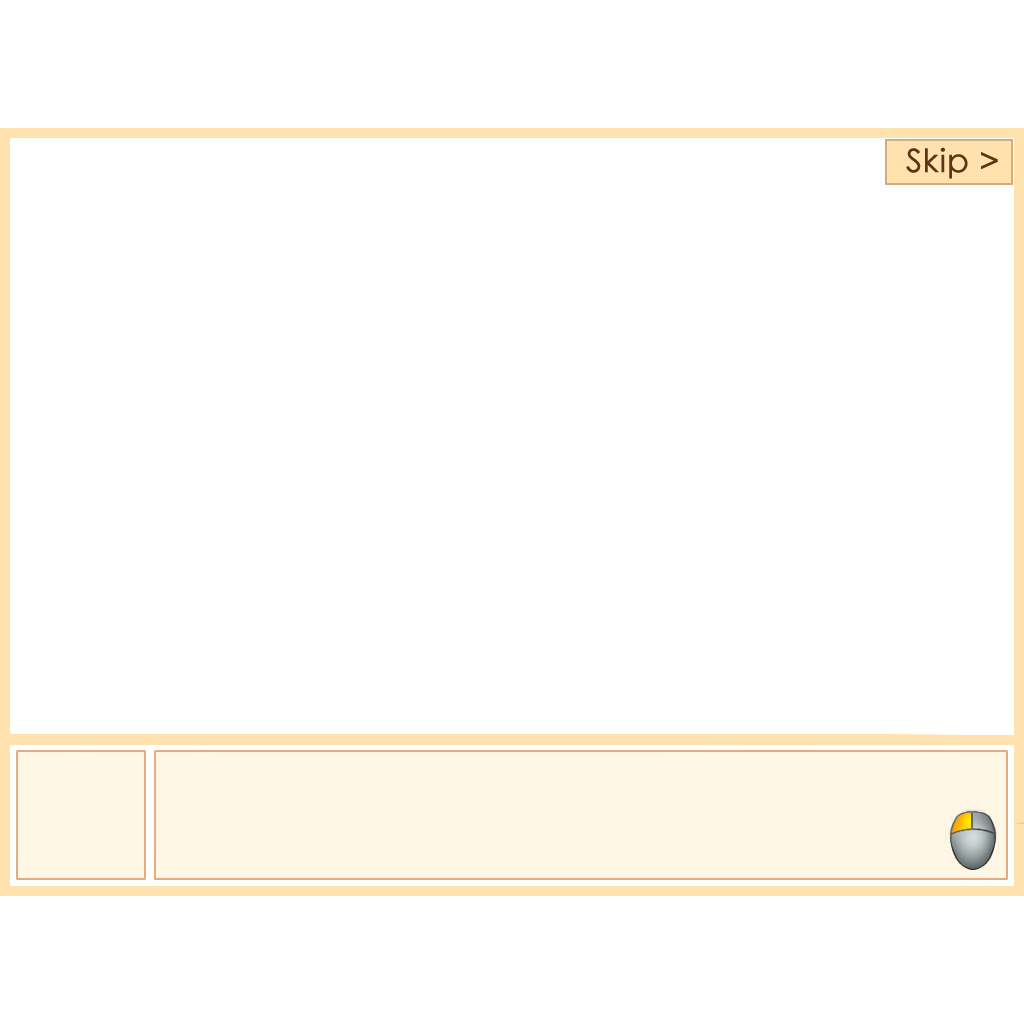
<style>
.page{position:relative;width:1024px;height:1024px;background:#ffffff}
.page>*{position:absolute;margin:0}
.t1{font:32px "CenturyGothic";color:#593617;font-weight:bold}
</style>
<div class="page">
<p class="t1" style="left:906px;top:147px;width:92px;height:32px">Skip &gt;</p>
</div>
